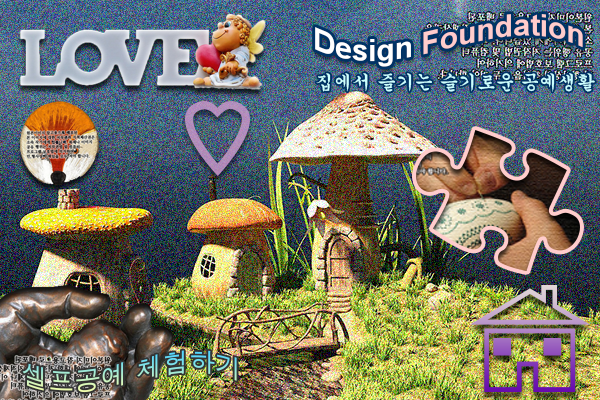
<style>
.page{position:relative;width:600px;height:400px}
.page>*{position:absolute;margin:0}
.t1{font:30px/36px "Arial-BoldMT";color:#ffcccc}
.t2{font:30px/36px "Arial-BoldMT";color:#ffffff}
.t3{font:18.7px "Gungsuh";color:#ccffff}
.t4{font:26.4px "Dotum"}
</style>
<div class="page">
<p class="t1" style="left:315px;top:14px;width:268px;height:53px"><span class="t2">Design </span>Foundation</p>
<p class="t3" style="left:316px;top:73px;width:279px;height:19px">집에서 즐기는 슬기로운 공예생활</p>
<p class="t4" style="left:22px;top:350px;width:215px;height:43px">셀프공예 체험하기</p>
</div>
